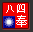
<style>
.page{position:relative;width:33px;height:32px;background:#f20000}
.page>*{position:absolute;margin:0}
.t1{font:10.4px "SimSun";color:#ffffff}
.t2{font:11.7px "SimSun";color:#ffffff}
</style>
<div class="page">
<p class="t1" style="left:6px;top:4px;width:19px;height:9px">八四</p>
<p class="t2" style="left:16px;top:15px;width:11px;height:12px">奉</p>
</div>
